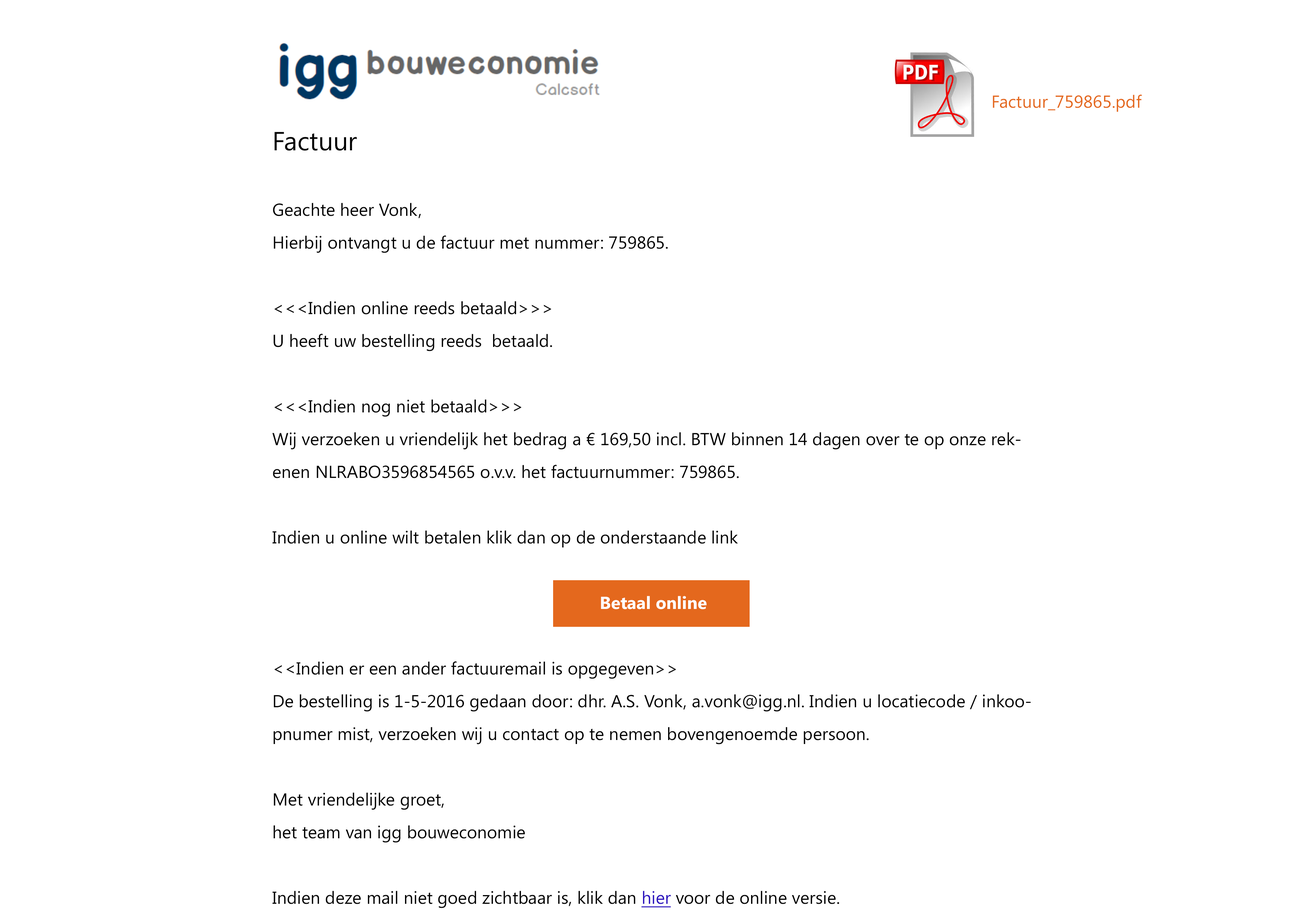
<style>
.page{position:relative;width:1310px;height:910px;background:#ffffff}
.page>*{position:absolute;margin:0}
.t1{font:17.5px "SegoeUI";color:#e4681d}
.t2{font:17.5px/32.8px "SegoeUI";color:#000000}
.t3{font:26.2px/32.8px "SegoeUI";color:#000000}
.t4{font:17.5px/32.8px "SegoeUI-Bold";color:#ffffff}
.t5{font:17.5px/32.8px "SegoeUI";color:#2b13be;text-decoration:underline}
</style>
<div class="page">
<p class="t1" style="left:993px;top:95px;width:149px;height:17px">Factuur_759865.pdf</p>
<p class="t2" style="left:272px;top:132px;width:759px;height:776px"><span class="t3">Factuur<br></span><br>Geachte heer Vonk,<br>Hierbij ontvangt u de factuur met nummer: 759865. <br><br>&lt;&lt;&lt;Indien online reeds betaald&gt;&gt;&gt;<br>U heeft uw bestelling reeds  betaald.<br><br>&lt;&lt;&lt;Indien nog niet betaald&gt;&gt;&gt;<br>Wij verzoeken u vriendelijk het bedrag a € 169,50 incl. BTW binnen 14 dagen over te op onze rekenen NLRABO3596854565 o.v.v. het factuurnummer: 759865.<br><br>Indien u online wilt betalen klik dan op de onderstaande link<br><br>                             <span class="t4">Betaal online<br></span><br>&lt;&lt;Indien er een ander factuuremail is opgegeven&gt;&gt;<br>De bestelling is 1-5-2016 gedaan door: dhr. A.S. Vonk, a.vonk@igg.nl. Indien u locatiecode / inkoopnumer mist, verzoeken wij u contact op te nemen bovengenoemde persoon.<br><br>Met vriendelijke groet,<br>het team van igg bouweconomie<br><br>Indien deze mail niet goed zichtbaar is, klik dan <span class="t5">hier</span> voor de online versie.</p>
</div>
